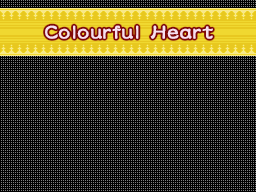
<style>
.page{position:relative;width:256px;height:192px;background:#000000}
.page>*{position:absolute;margin:0}
.t1{font:24px "DFLeiShoStd-W5";color:#f8e0f0;font-weight:bold}
</style>
<div class="page">
<p class="t1" style="left:45px;top:25px;width:168px;height:14px">Colourful Heart</p>
</div>
